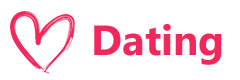
<style>
.page{position:relative;width:240px;height:80px;background:#ffffff}
.page>*{position:absolute;margin:0}
.t1{font:42px "SegoeUI-Bold";color:#f3275c}
</style>
<div class="page">
<p class="t1" style="left:94px;top:24px;width:128px;height:41px">Dating</p>
</div>
